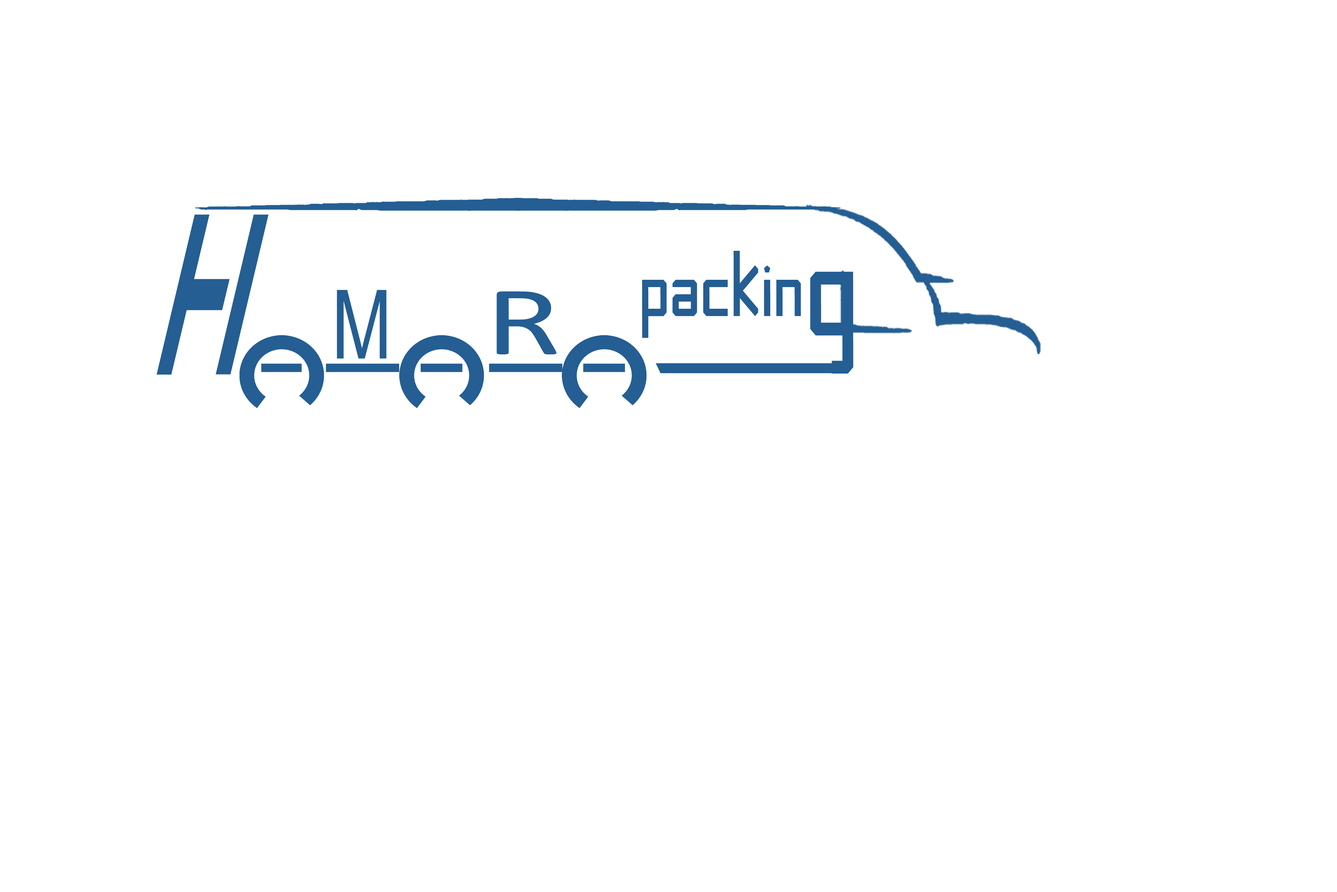
<style>
.page{position:relative;width:1337px;height:892px;background:#ffffff}
.page>*{position:absolute;margin:0}
.t1{font:233.5px "Android";color:#245e93;scale:0.45 1}
.t2{font:116px "Banana-Square";color:#245e93;scale:0.84 1}
.t3{font:203.5px "Banana-Square";color:#245e93;scale:0.84 1}
.t4{font:95.4px "ArialMT";color:#245e93;scale:0.76 1}
.t5{font:99px "Calibri";color:#245e93;scale:1.43 1}
</style>
<div class="page">
<p class="t1" style="left:156px;top:214px;width:113px;height:160px">H</p>
<p class="t2" style="left:642px;top:251px;width:159px;height:87px">paCkin</p>
<p class="t3" style="left:810px;top:271px;width:44px;height:103px">g</p>
<p class="t4" style="left:337px;top:290px;width:50px;height:68px">M</p>
<p class="t5" style="left:497px;top:291px;width:60px;height:63px">R</p>
</div>
